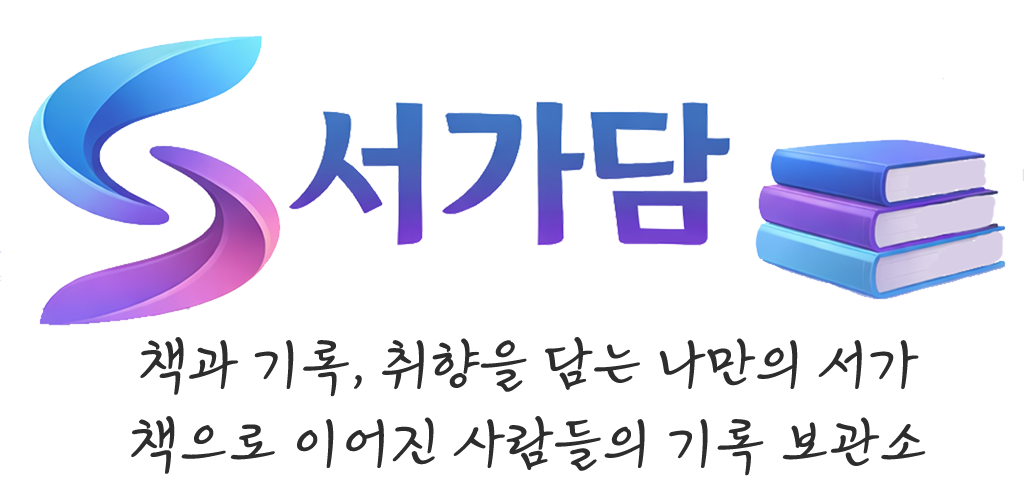
<style>
.page{position:relative;width:1024px;height:500px;background:#ffffff}
.page>*{position:absolute;margin:0}
.t1{font:60px "KimjungchulScript-Regular";color:#2d2d2d}
</style>
<div class="page">
<p class="t1" style="left:140px;top:337px;width:779px;height:60px">책과 기록, 취향을 담는 나만의 서가</p>
<p class="t1" style="left:131px;top:416px;width:795px;height:60px">책으로 이어진 사람들의 기록 보관소</p>
</div>
